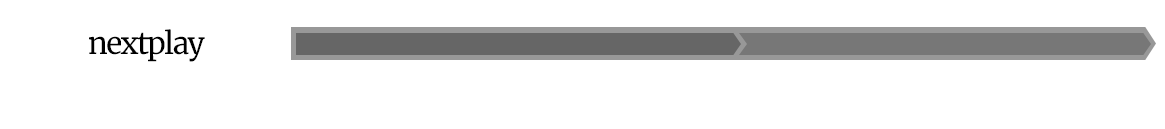
<style>
.page{position:relative;width:1165px;height:129px;background:#ffffff}
.page>*{position:absolute;margin:0}
.t1{font:30px "Merriweather-Regular";letter-spacing:-0.06em;color:#000000}
</style>
<div class="page">
<p class="t1" style="left:89px;top:29px;width:116px;height:33px">nextplay</p>
</div>
